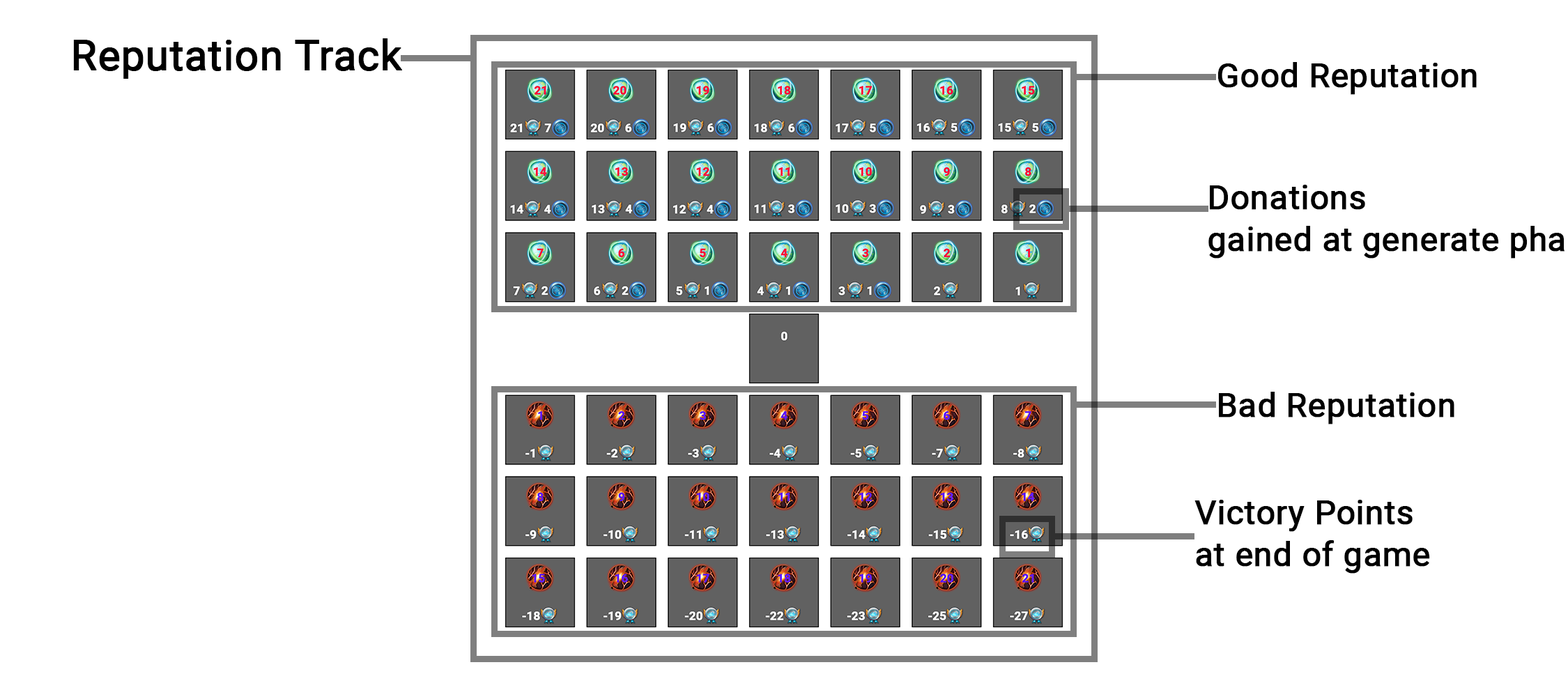
<style>
.page{position:relative;width:1568px;height:697px;background:#ffffff}
.page>*{position:absolute;margin:0}
.t1{font:41.8px "Roboto-Regular";color:#000000;font-weight:bold}
.t2{font:33.5px "Roboto-Regular";color:#000000;font-weight:bold}
.t3{font:33.5px/41.8px "Roboto-Regular";color:#000000;font-weight:bold}
</style>
<div class="page">
<p class="t1" style="left:73px;top:38px;width:329px;height:41px">Reputation Track</p>
<p class="t2" style="left:1217px;top:62px;width:260px;height:33px">Good Reputation</p>
<p class="t2" style="left:1219px;top:392px;width:235px;height:32px">Bad Reputation</p>
<p class="t3" style="left:1194px;top:500px;width:236px;height:74px">Victory Points<br>at end of game</p>
</div>
